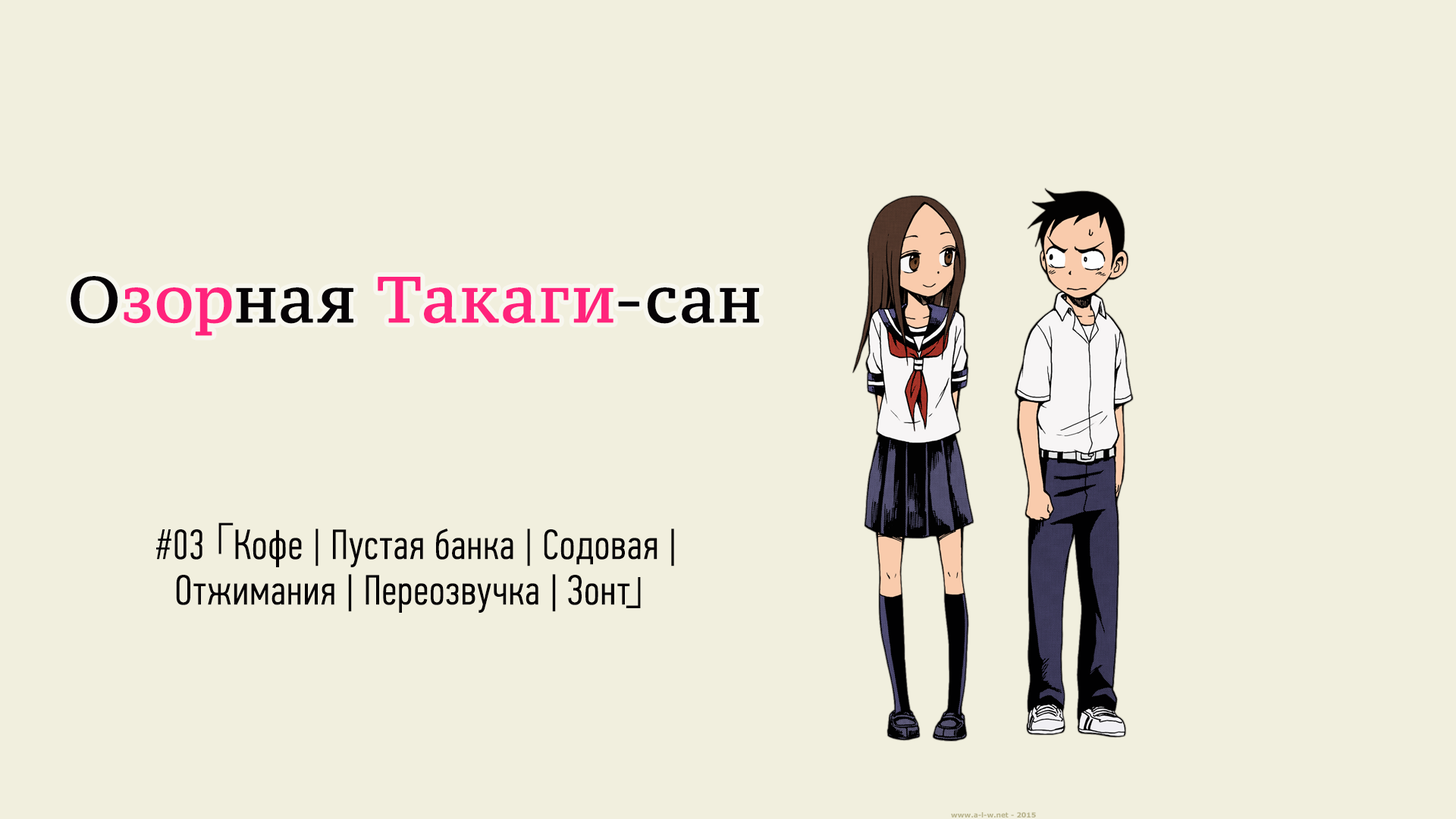
<style>
.page{position:relative;width:1456px;height:819px;background:#f1efde}
.page>*{position:absolute;margin:0}
.t1{font:64.5px "PTSerif-Caption";letter-spacing:-0.005em;color:#ff237c;font-weight:bold}
.t2{font:64.5px "PTSerif-Caption";letter-spacing:-0.005em;color:#060306;font-weight:bold}
.t3{font:41.9px/45.5px "PFDinTextCompPro-Light";color:#060306;font-weight:bold}
.t4{font:41.9px/45.5px "KozGoPr6N-Regular";color:#060306;font-weight:bold}
</style>
<div class="page">
<p class="t1" style="left:71px;top:276px;width:688px;height:60px"><span class="t2">О</span>зор<span class="t2">ная </span>Такаги<span class="t2">-сан</span></p>
<p class="t3" style="left:156px;top:522px;width:518px;height:91px;text-align:center">#03<span class="t4">「</span>Кофе | Пустая банка | Содовая | <br>Отжимания | Переозвучка | Зонт<span class="t4">」</span></p>
</div>
